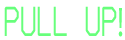
<style>
.page{position:relative;width:125px;height:40px;background:#ffffff}
.page>*{position:absolute;margin:0}
.t1{font:41.7px "HornetDisplay-Bold";color:#67ff7b;scale:0.71 1}
.t2{font:41.7px "MyriadPro-Regular";color:#67ff7b;scale:0.71 1}
</style>
<div class="page">
<p class="t1" style="left:4px;top:6px;width:119px;height:31px">pull up<span class="t2">!</span></p>
</div>
